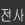
<style>
.page{position:relative;width:25px;height:25px;background:#333333}
.page>*{position:absolute;margin:0}
.t1{font:16.1px "System";scale:0.78 1}
</style>
<div class="page">
<p class="t1" style="left:1px;top:8px;width:23px;height:14px">전사</p>
</div>
